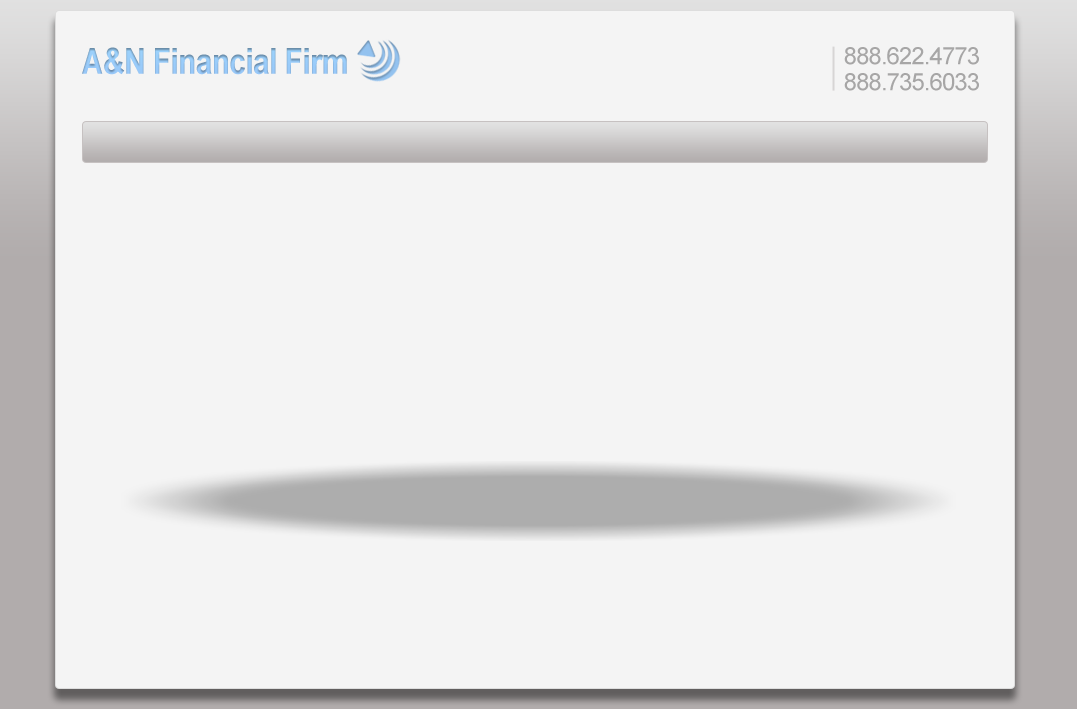
<style>
.page{position:relative;width:1077px;height:709px;background:#f4f4f4}
.page>*{position:absolute;margin:0}
.t1{font:36px "Arial-BoldMT";letter-spacing:-0.02em;color:#94c5f0;scale:0.83 1}
.t2{font:36px "Arial-BoldMT";letter-spacing:-0.02em;color:#94c5f0;scale:0.9 1}
.t3{font:24px "ArialMT";letter-spacing:-0.04em;color:#a7a6a6}
</style>
<div class="page">
<p class="t1" style="left:82px;top:47px;width:265px;height:28px">A&amp;N Financial Fi<span class="t2">r</span>m</p>
<p class="t3" style="left:844px;top:47px;width:135px;height:18px">888.622.4773</p>
<p class="t3" style="left:844px;top:73px;width:135px;height:18px">888.735.6033</p>
</div>
